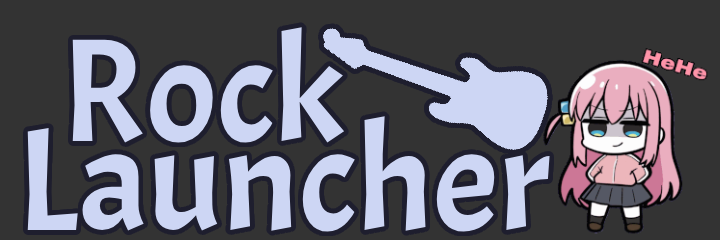
<style>
.page{position:relative;width:720px;height:240px;background:#333333}
.page>*{position:absolute;margin:0}
.t1{font:146.9px "Acme-Regular";color:#cdd6f4}
</style>
<div class="page">
<p class="t1" style="left:72px;top:27px;width:272px;height:116px">Rock</p>
<p class="t1" style="left:27px;top:116px;width:523px;height:116px">Launcher</p>
</div>
